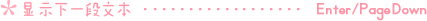
<style>
.page{position:relative;width:427px;height:21px;background:#ffffff}
.page>*{position:absolute;margin:0}
.t1{font:18px "¢è?";color:#ff93a5}
</style>
<div class="page">
<p class="t1" style="left:24px;top:1px;width:107px;height:16px">显示下一段文本</p>
</div>
